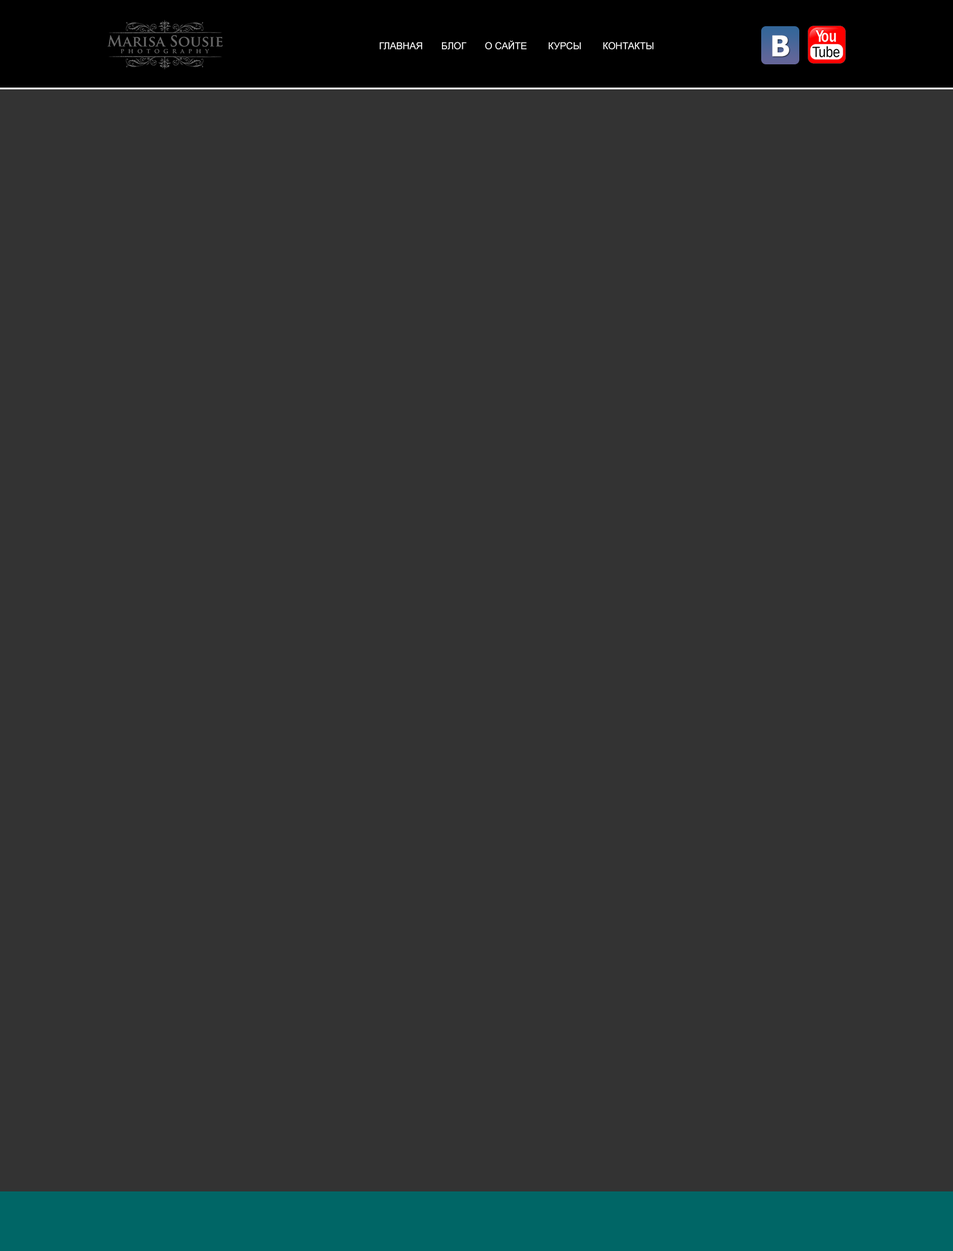
<style>
.page{position:relative;width:953px;height:1251px;background:#333333}
.page>*{position:absolute;margin:0}
.t1{font:9.5px "ArialMT";color:#ffffff}
.t2{font:28.6px "Tahoma-Bold";color:#ffffff}
</style>
<div class="page">
<p class="t1" style="left:379px;top:41px;width:275px;height:8px">ГЛАВНАЯ       БЛОГ       О САЙТЕ        КУРСЫ        КОНТАКТЫ</p>
<p class="t2" style="left:772px;top:35px;width:17px;height:22px">B</p>
</div>
